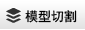
<style>
.page{position:relative;width:85px;height:30px}
.page>*{position:absolute;margin:0}
.t1{font:13px "SimHei";color:#000000}
</style>
<div class="page">
<p class="t1" style="left:25px;top:10px;width:52px;height:13px">模型切割</p>
</div>
